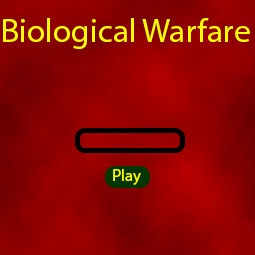
<style>
.page{position:relative;width:255px;height:255px}
.page>*{position:absolute;margin:0}
.t1{font:33.3px "MyriadPro-Regular";color:#ffff00}
.t2{font:16.7px "MyriadPro-Regular";color:#ffff00}
</style>
<div class="page">
<p class="t1" style="left:3px;top:18px;width:247px;height:31px">Biological Warfare</p>
<p class="t2" style="left:113px;top:169px;width:28px;height:16px">Play</p>
</div>
